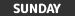
<style>
.page{position:relative;width:75px;height:16px;background:#333333}
.page>*{position:absolute;margin:0}
.t1{font:12.5px "RoundedMplus1c-ExtraBold";color:#ffffff}
</style>
<div class="page">
<p class="t1" style="left:13px;top:3px;width:48px;height:11px">SUNDAY</p>
</div>
